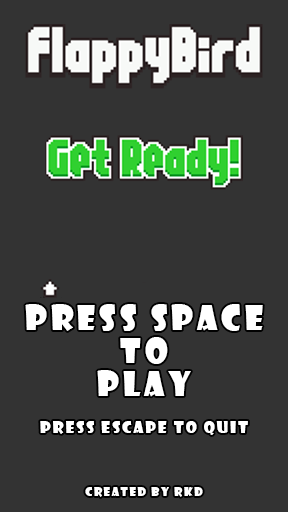
<style>
.page{position:relative;width:288px;height:512px;background:#333333}
.page>*{position:absolute;margin:0}
.t1{font:32.8px/32.8px "ShowcardGothic-Reg";letter-spacing:0.12em;color:#ffffff}
.t2{font:16px "ShowcardGothic-Reg";letter-spacing:0.12em;color:#ffffff}
.t3{font:12px "ShowcardGothic-Reg";letter-spacing:0.12em;color:#ffffff}
</style>
<div class="page">
<p class="t1" style="left:25px;top:304px;width:238px;height:93px;text-align:center">Press Space To<br>Play</p>
<p class="t2" style="left:40px;top:421px;width:208px;height:14px">Press Escape to Quit</p>
<p class="t3" style="left:85px;top:487px;width:118px;height:10px">Created by RKD</p>
</div>
